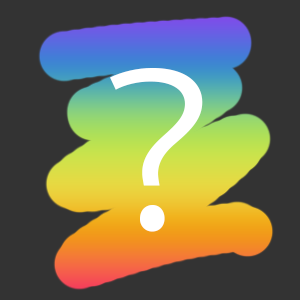
<style>
.page{position:relative;width:300px;height:300px;background:#333333}
.page>*{position:absolute;margin:0}
.t1{font:208.3px "KozGoPr6N-Regular";color:#ffffff}
</style>
<div class="page">
<p class="t1" style="left:110px;top:67px;width:93px;height:165px">？</p>
</div>
